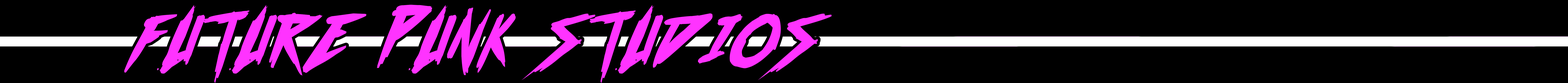
<style>
.page{position:relative;width:1568px;height:83px;background:#000000}
.page>*{position:absolute;margin:0}
.t1{font:58.1px "outrunfuture-BoldItalic";color:#ff33ff;scale:0.77 1}
</style>
<div class="page">
<p class="t1" style="left:124px;top:5px;width:708px;height:78px">FUTURE   PUNK   STUDIOS</p>
</div>
